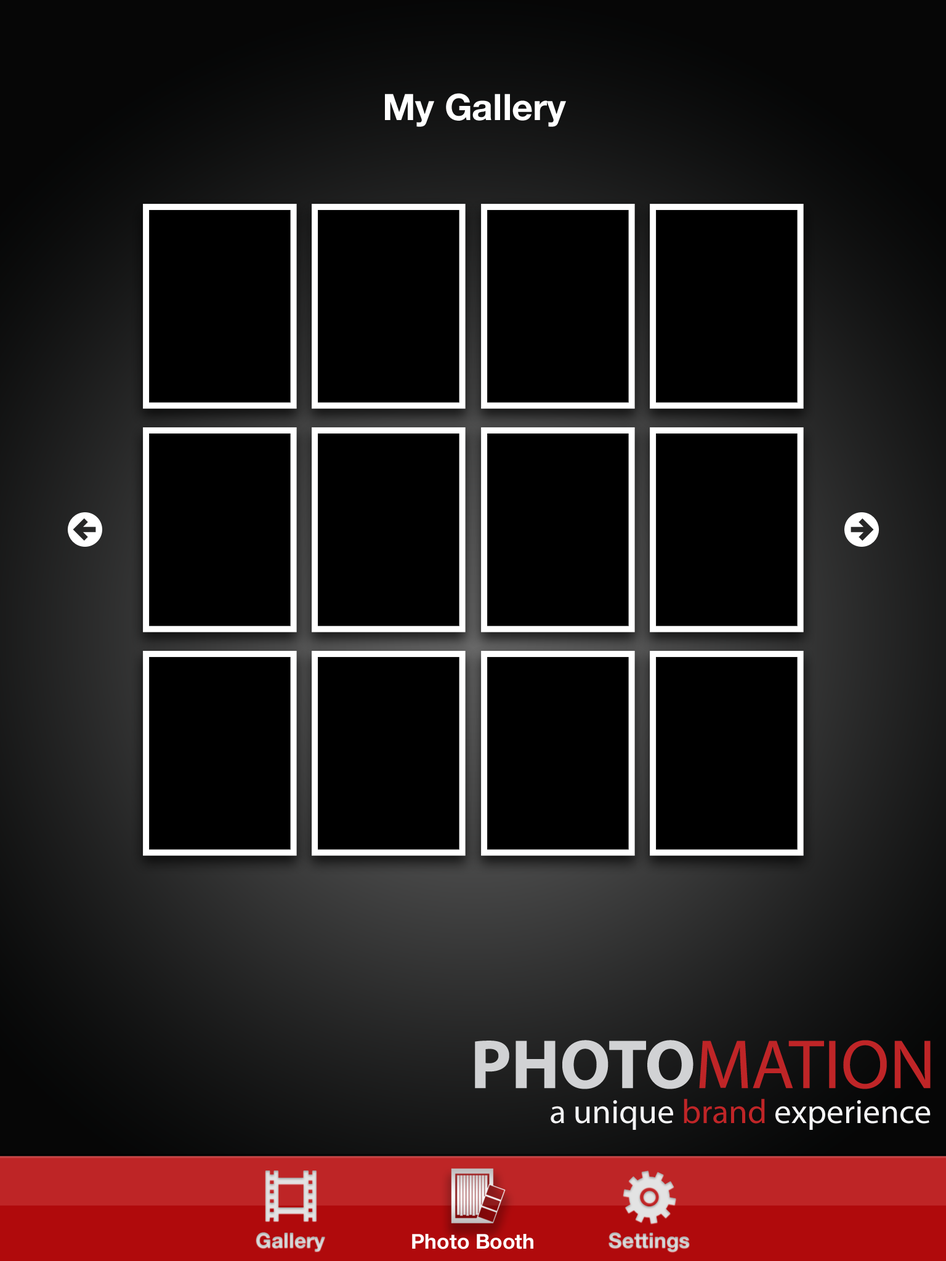
<style>
.page{position:relative;width:946px;height:1261px;background:#000000}
.page>*{position:absolute;margin:0}
.t1{font:36.5px "HelveticaNeue-Bold";color:#ffffff}
.t2{font:20.7px "HelveticaNeue-Bold";color:#cfcfcf}
.t3{font:20.7px "HelveticaNeue-Bold";color:#ffffff}
.t4{font:20.7px "HelveticaNeue-Bold";color:#cdcdcd}
</style>
<div class="page">
<p class="t1" style="left:385px;top:93px;width:181px;height:34px">My Gallery</p>
<p class="t2" style="left:256px;top:1232px;width:69px;height:19px">Gallery</p>
<p class="t3" style="left:412px;top:1234px;width:121px;height:15px">Photo Booth</p>
<p class="t4" style="left:608px;top:1232px;width:81px;height:20px">Settings</p>
</div>
